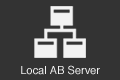
<style>
.page{position:relative;width:120px;height:80px;background:#333333}
.page>*{position:absolute;margin:0}
.t1{font:11px "Helvetica";color:#f2f2f2}
</style>
<div class="page">
<p class="t1" style="left:21px;top:65px;width:79px;height:10px">Local AB Server</p>
</div>
